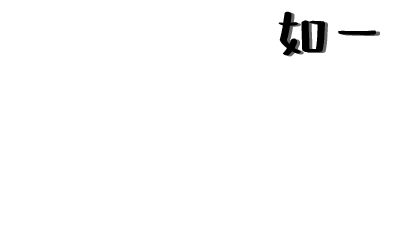
<style>
.page{position:relative;width:400px;height:225px;background:#ffffff}
.page>*{position:absolute;margin:0}
.t1{font:55.6px "FZZJ-QNTJW--GB1-0";color:#000000}
.t2{font:55.6px "FZZJ-QNTJW--GB1-0"}
</style>
<div class="page">
<p class="t1" style="left:278px;top:11px;width:98px;height:45px">如一</p>
<p class="t2" style="left:281px;top:12px;width:99px;height:45px">如一</p>
</div>
